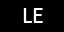
<style>
.page{position:relative;width:64px;height:32px;background:#000000}
.page>*{position:absolute;margin:0}
.t1{font:24px "Calibri";color:#feffff}
</style>
<div class="page">
<p class="t1" style="left:23px;top:8px;width:20px;height:15px">LE</p>
</div>
